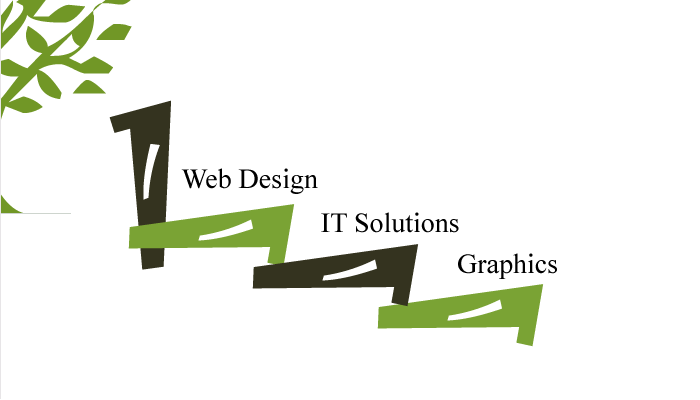
<style>
.page{position:relative;width:700px;height:400px;background:#ffffff}
.page>*{position:absolute;margin:0}
.t1{font:199px "Jokerman-Regular";color:#34331f}
.t2{font:28px "TimesNewRomanPSMT";color:#000000}
.t3{font:199px "Jokerman-Regular";color:#7aa334}
</style>
<div class="page">
<p class="t1" style="left:109px;top:100px;width:62px;height:170px">1</p>
<p class="t2" style="left:181px;top:168px;width:137px;height:26px">Web Design</p>
<p class="t3" style="left:128px;top:204px;width:167px;height:63px;rotate:-95deg">1</p>
<p class="t2" style="left:321px;top:212px;width:138px;height:21px">IT Solutions</p>
<p class="t1" style="left:252px;top:244px;width:167px;height:63px;rotate:-95deg">1</p>
<p class="t2" style="left:458px;top:253px;width:99px;height:26px">Graphics</p>
<p class="t3" style="left:377px;top:284px;width:167px;height:63px;rotate:-95deg">1</p>
</div>
